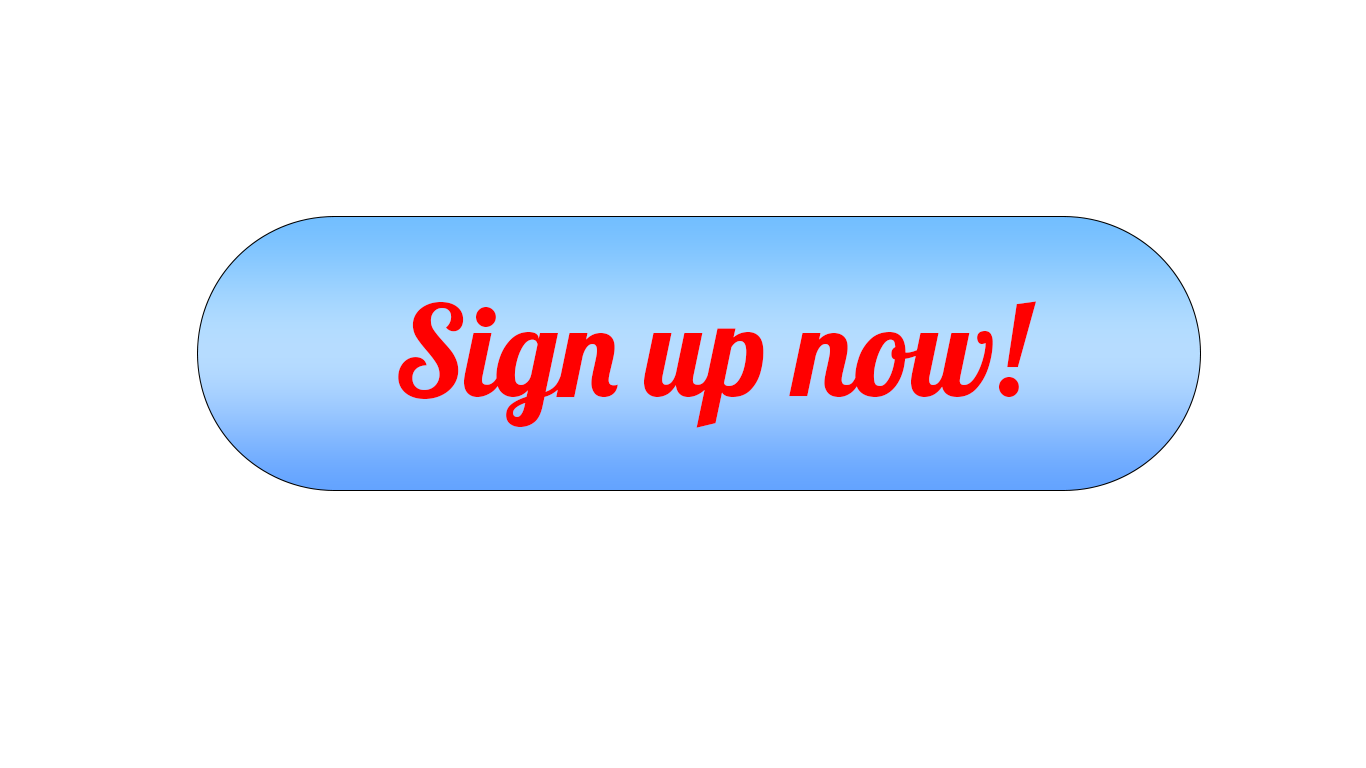
<style>
.page{position:relative;width:1366px;height:768px;background:#ffffff}
.page>*{position:absolute;margin:0}
.t1{font:125px "Lobster-Regular";color:#ff0000}
</style>
<div class="page">
<p class="t1" style="left:398px;top:301px;width:638px;height:127px">Sign up now!</p>
</div>
